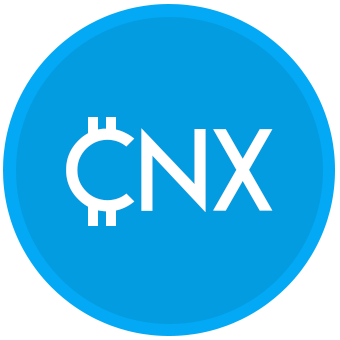
<style>
.page{position:relative;width:340px;height:340px;background:#039ce1}
.page>*{position:absolute;margin:0}
.t1{font:112px "LemonMilklight";color:#ffffff}
</style>
<div class="page">
<p class="t1" style="left:66px;top:128px;width:207px;height:85px">CNX</p>
</div>
